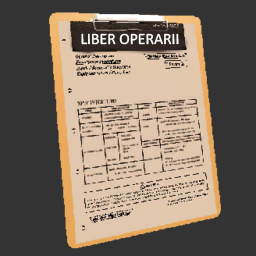
<style>
.page{position:relative;width:256px;height:256px;background:#333333}
.page>*{position:absolute;margin:0}
.t1{font:15.7px "Calibri";color:#ffffff}
</style>
<div class="page">
<p class="t1" style="left:81px;top:33px;width:98px;height:12px">LIBER OPERARII</p>
</div>
